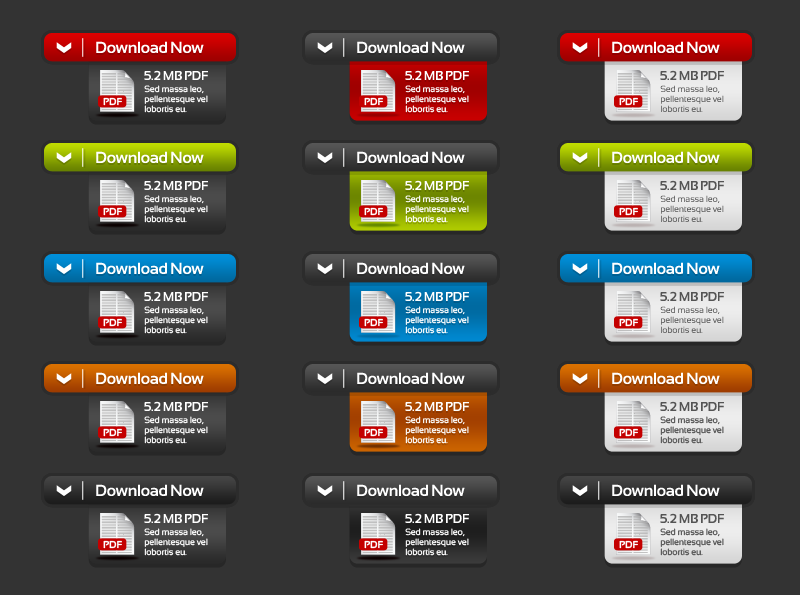
<style>
.page{position:relative;width:800px;height:595px;background:#333333}
.page>*{position:absolute;margin:0}
.t1{font:16px "Sansation-Bold";letter-spacing:-0.02em;color:#ffffff}
.t2{font:13px "Sansation-Bold";letter-spacing:-0.02em;color:#ffffff}
.t3{font:13px "Sansation-Bold";letter-spacing:-0.02em;color:#545454}
.t4{font:9px/10px "Sansation-Regular";letter-spacing:-0.02em;color:#ffffff}
.t5{font:9px/10px "Sansation-Regular";letter-spacing:-0.02em;color:#545454}
.t6{font:10px "Sansation-Bold";color:#ffffff}
</style>
<div class="page">
<p class="t1" style="left:96px;top:41px;width:108px;height:12px">Download Now</p>
<p class="t1" style="left:357px;top:41px;width:108px;height:12px">Download Now</p>
<p class="t1" style="left:612px;top:41px;width:108px;height:12px">Download Now</p>
<p class="t2" style="left:144px;top:70px;width:64px;height:10px">5.2 MB PDF</p>
<p class="t2" style="left:405px;top:70px;width:64px;height:10px">5.2 MB PDF</p>
<p class="t3" style="left:660px;top:70px;width:64px;height:10px">5.2 MB PDF</p>
<p class="t4" style="left:144px;top:85px;width:64px;height:28px">Sed massa leo, pellentesque vel lobortis eu.</p>
<p class="t4" style="left:405px;top:85px;width:64px;height:28px">Sed massa leo, pellentesque vel lobortis eu.</p>
<p class="t5" style="left:660px;top:85px;width:64px;height:27px">Sed massa leo, pellentesque vel lobortis eu.</p>
<p class="t6" style="left:103px;top:97px;width:19px;height:9px">PDF</p>
<p class="t6" style="left:364px;top:97px;width:19px;height:9px">PDF</p>
<p class="t6" style="left:619px;top:97px;width:19px;height:9px">PDF</p>
<p class="t1" style="left:96px;top:151px;width:108px;height:12px">Download Now</p>
<p class="t1" style="left:357px;top:151px;width:108px;height:12px">Download Now</p>
<p class="t1" style="left:612px;top:151px;width:108px;height:12px">Download Now</p>
<p class="t2" style="left:144px;top:180px;width:64px;height:10px">5.2 MB PDF</p>
<p class="t2" style="left:405px;top:180px;width:64px;height:10px">5.2 MB PDF</p>
<p class="t3" style="left:660px;top:180px;width:64px;height:10px">5.2 MB PDF</p>
<p class="t4" style="left:144px;top:195px;width:64px;height:28px">Sed massa leo, pellentesque vel lobortis eu.</p>
<p class="t4" style="left:405px;top:195px;width:64px;height:28px">Sed massa leo, pellentesque vel lobortis eu.</p>
<p class="t5" style="left:660px;top:195px;width:64px;height:27px">Sed massa leo, pellentesque vel lobortis eu.</p>
<p class="t6" style="left:103px;top:207px;width:19px;height:9px">PDF</p>
<p class="t6" style="left:364px;top:207px;width:19px;height:9px">PDF</p>
<p class="t6" style="left:619px;top:207px;width:19px;height:9px">PDF</p>
<p class="t1" style="left:96px;top:262px;width:108px;height:12px">Download Now</p>
<p class="t1" style="left:357px;top:262px;width:108px;height:12px">Download Now</p>
<p class="t1" style="left:612px;top:262px;width:108px;height:12px">Download Now</p>
<p class="t2" style="left:144px;top:291px;width:64px;height:10px">5.2 MB PDF</p>
<p class="t2" style="left:405px;top:291px;width:64px;height:10px">5.2 MB PDF</p>
<p class="t3" style="left:660px;top:291px;width:64px;height:10px">5.2 MB PDF</p>
<p class="t6" style="left:103px;top:318px;width:19px;height:9px">PDF</p>
<p class="t4" style="left:144px;top:306px;width:64px;height:28px">Sed massa leo, pellentesque vel lobortis eu.</p>
<p class="t6" style="left:364px;top:318px;width:19px;height:9px">PDF</p>
<p class="t4" style="left:405px;top:306px;width:64px;height:28px">Sed massa leo, pellentesque vel lobortis eu.</p>
<p class="t6" style="left:619px;top:318px;width:19px;height:9px">PDF</p>
<p class="t5" style="left:660px;top:306px;width:64px;height:27px">Sed massa leo, pellentesque vel lobortis eu.</p>
<p class="t1" style="left:96px;top:372px;width:108px;height:12px">Download Now</p>
<p class="t1" style="left:357px;top:372px;width:108px;height:12px">Download Now</p>
<p class="t1" style="left:612px;top:372px;width:108px;height:12px">Download Now</p>
<p class="t2" style="left:144px;top:401px;width:64px;height:10px">5.2 MB PDF</p>
<p class="t2" style="left:405px;top:401px;width:64px;height:10px">5.2 MB PDF</p>
<p class="t3" style="left:660px;top:401px;width:64px;height:10px">5.2 MB PDF</p>
<p class="t4" style="left:144px;top:416px;width:64px;height:28px">Sed massa leo, pellentesque vel lobortis eu.</p>
<p class="t4" style="left:405px;top:416px;width:64px;height:28px">Sed massa leo, pellentesque vel lobortis eu.</p>
<p class="t5" style="left:660px;top:416px;width:64px;height:28px">Sed massa leo, pellentesque vel lobortis eu.</p>
<p class="t6" style="left:103px;top:428px;width:19px;height:9px">PDF</p>
<p class="t6" style="left:364px;top:428px;width:19px;height:9px">PDF</p>
<p class="t6" style="left:619px;top:428px;width:19px;height:9px">PDF</p>
<p class="t1" style="left:96px;top:484px;width:108px;height:12px">Download Now</p>
<p class="t1" style="left:357px;top:484px;width:108px;height:12px">Download Now</p>
<p class="t1" style="left:612px;top:484px;width:108px;height:12px">Download Now</p>
<p class="t2" style="left:144px;top:513px;width:64px;height:10px">5.2 MB PDF</p>
<p class="t2" style="left:405px;top:513px;width:64px;height:10px">5.2 MB PDF</p>
<p class="t3" style="left:660px;top:513px;width:64px;height:10px">5.2 MB PDF</p>
<p class="t4" style="left:144px;top:528px;width:64px;height:28px">Sed massa leo, pellentesque vel lobortis eu.</p>
<p class="t4" style="left:405px;top:528px;width:64px;height:28px">Sed massa leo, pellentesque vel lobortis eu.</p>
<p class="t5" style="left:660px;top:528px;width:64px;height:28px">Sed massa leo, pellentesque vel lobortis eu.</p>
<p class="t6" style="left:103px;top:540px;width:19px;height:9px">PDF</p>
<p class="t6" style="left:364px;top:540px;width:19px;height:9px">PDF</p>
<p class="t6" style="left:619px;top:540px;width:19px;height:9px">PDF</p>
</div>
